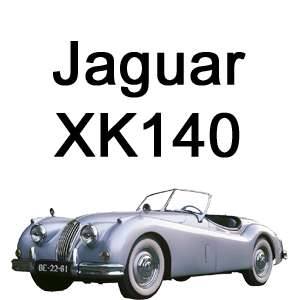
<style>
.page{position:relative;width:300px;height:300px;background:#ffffff}
.page>*{position:absolute;margin:0}
.t1{font:60px "ArialMT";color:#000000;font-weight:bold}
</style>
<div class="page">
<p class="t1" style="left:53px;top:41px;width:193px;height:117px;text-align:center">Jaguar<br>XK140</p>
</div>
